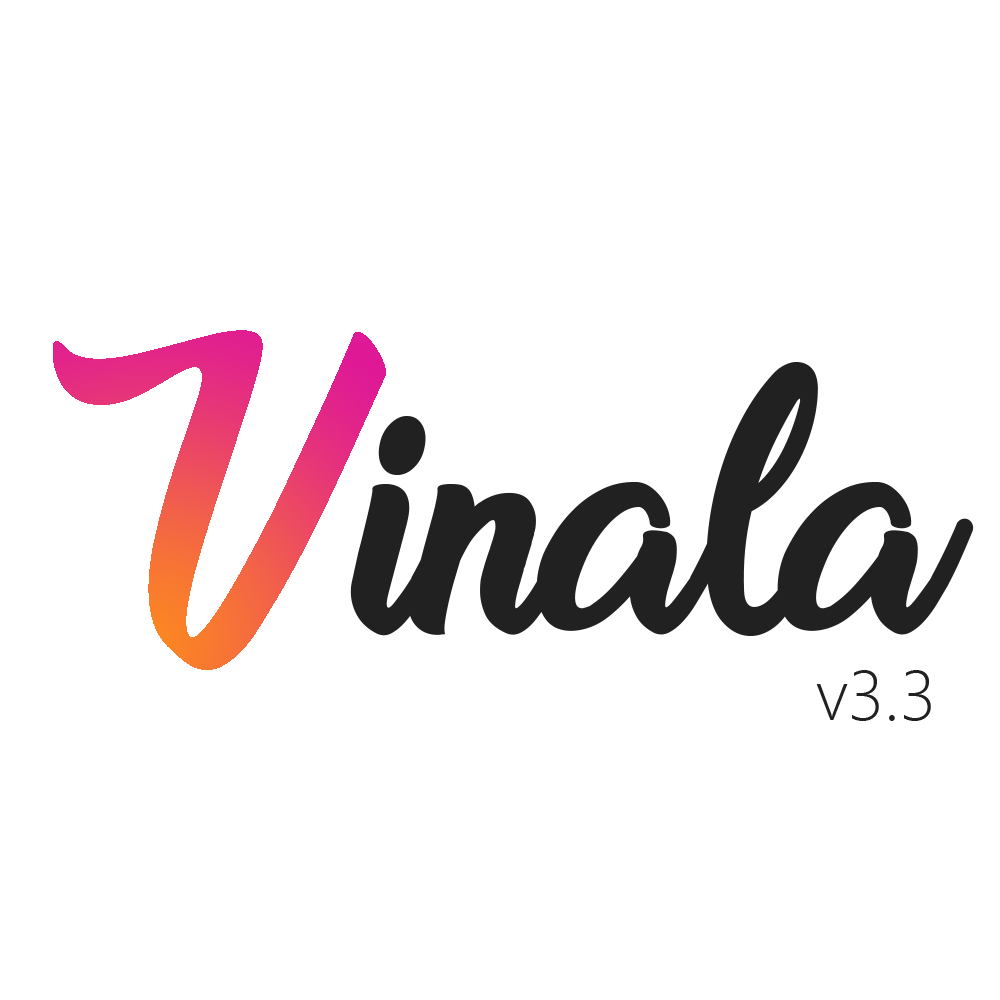
<style>
.page{position:relative;width:1000px;height:1000px;background:#ffffff}
.page>*{position:absolute;margin:0}
.t1{font:416.7px "SweetSensationsPersonalUse";color:#212121}
.t2{font:70.9px "SegoeUI-Light";color:#212121}
</style>
<div class="page">
<p class="t1" style="left:350px;top:362px;width:624px;height:274px">inala</p>
<p class="t2" style="left:816px;top:670px;width:115px;height:51px">v3.3</p>
</div>
